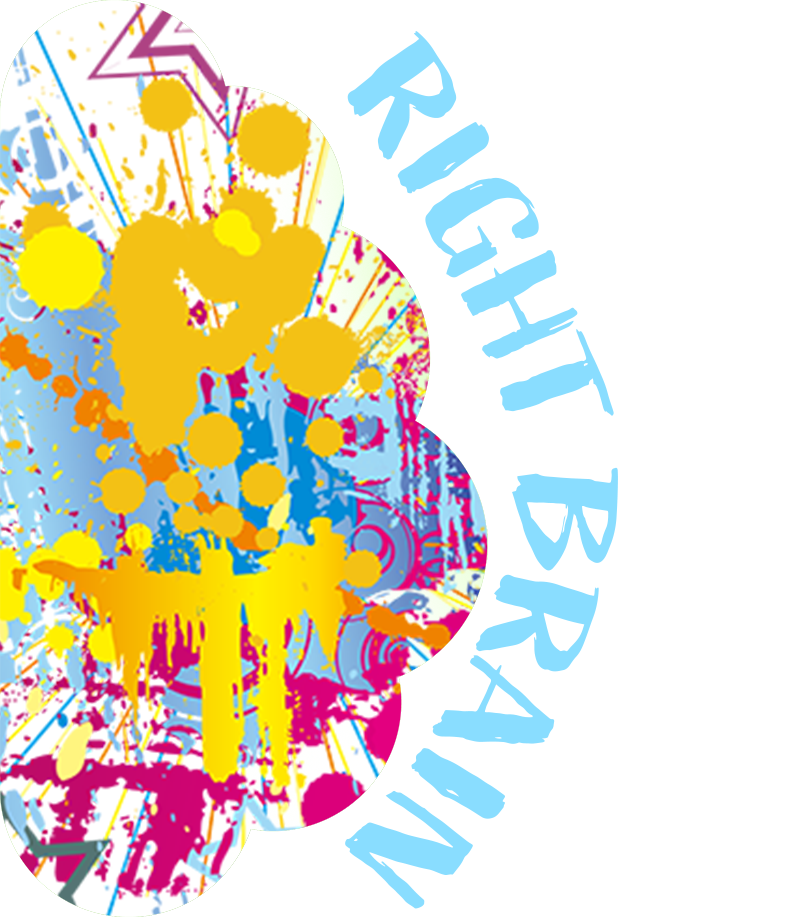
<style>
.page{position:relative;width:800px;height:917px;background:#ffffff}
.page>*{position:absolute;margin:0}
.t1{font:143.2px "Active-Regular";color:#89ddff;scale:1.35 1}
</style>
<div class="page">
<p class="t1" style="left:347px;top:31px;width:267px;height:385px;rotate:63deg">RIGHT</p>
<p class="t1" style="left:345px;top:467px;width:273px;height:442px;rotate:115deg">BRAIN</p>
</div>
